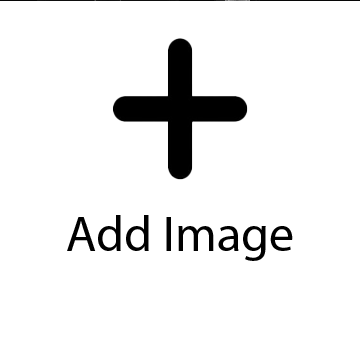
<style>
.page{position:relative;width:360px;height:360px;background:#ffffff}
.page>*{position:absolute;margin:0}
.t1{font:50px "MyriadPro-Regular";color:#000000}
</style>
<div class="page">
<p class="t1" style="left:67px;top:214px;width:226px;height:46px">Add Image</p>
</div>
